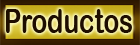
<style>
.page{position:relative;width:140px;height:45px}
.page>*{position:absolute;margin:0}
.t1{font:34px "ArialRoundedMTBold";color:#1e0e00;scale:0.76 1}
</style>
<div class="page">
<p class="t1" style="left:6px;top:9px;width:126px;height:24px">Productos</p>
</div>
